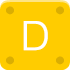
<style>
.page{position:relative;width:70px;height:70px;background:#ffcc00}
.page>*{position:absolute;margin:0}
.t1{font:40px "Helvetica-Light";letter-spacing:0.02em;color:#ffffff;font-weight:bold}
</style>
<div class="page">
<p class="t1" style="left:23px;top:21px;width:25px;height:30px">D</p>
</div>
